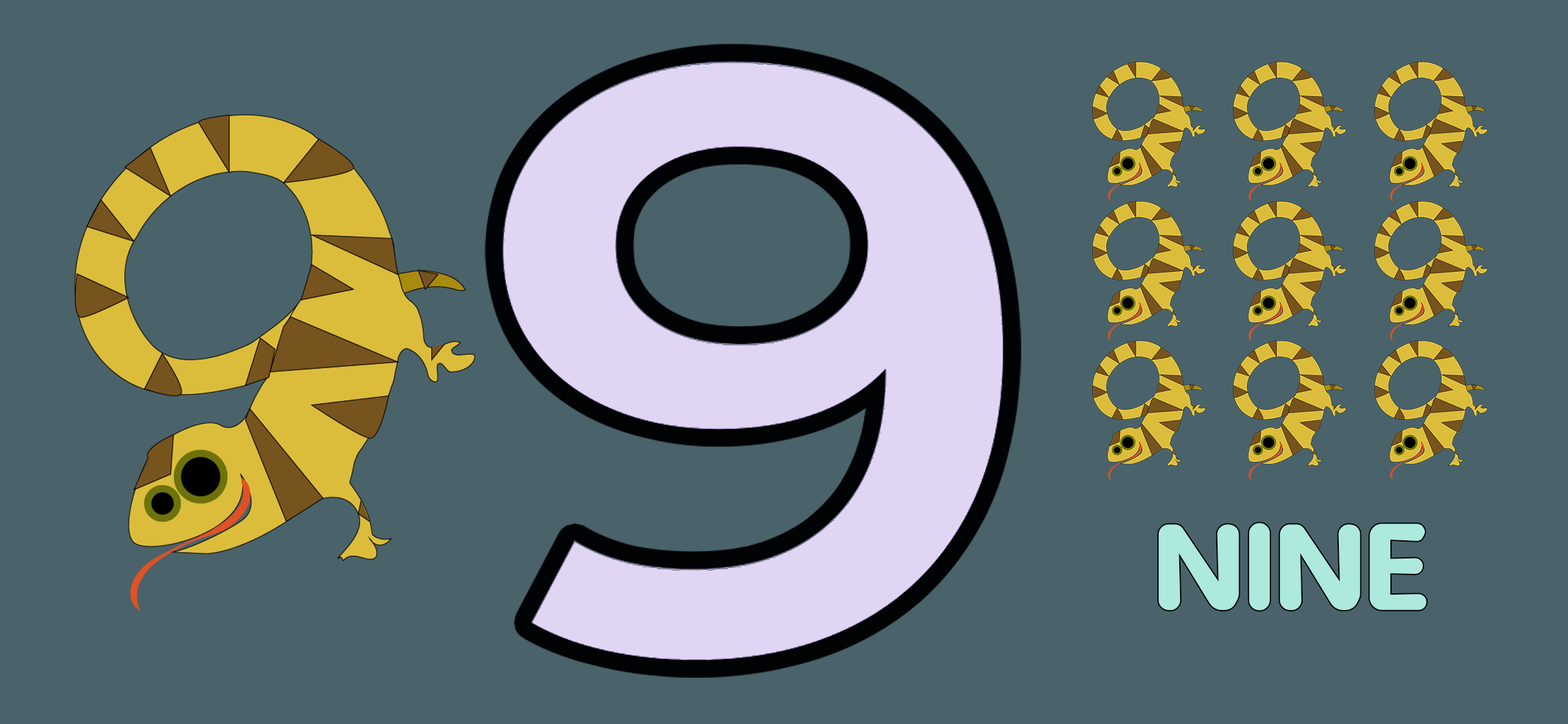
<style>
.page{position:relative;width:1568px;height:724px;background:#4a636b}
.page>*{position:absolute;margin:0}
.t1{font:139.6px "Dyuthi";color:#ade9dd}
</style>
<div class="page">
<p class="t1" style="left:1159px;top:523px;width:268px;height:87px">NINE</p>
</div>
